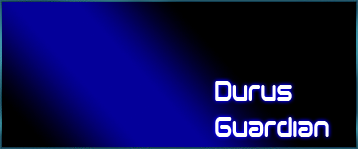
<style>
.page{position:relative;width:358px;height:149px;background:#000000}
.page>*{position:absolute;margin:0}
.t1{font:30px "SciFied2002";color:#ffffff;scale:0.8 1}
</style>
<div class="page">
<p class="t1" style="left:215px;top:81px;width:114px;height:56px">Durus<br>Guardian</p>
</div>
